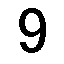
<style>
.page{position:relative;width:64px;height:64px;background:#ffffff}
.page>*{position:absolute;margin:0}
.t1{font:60px "MicrosoftSansSerif";color:#000000}
</style>
<div class="page">
<p class="t1" style="left:19px;top:8px;width:27px;height:45px">9</p>
</div>
